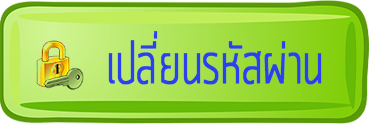
<style>
.page{position:relative;width:369px;height:124px}
.page>*{position:absolute;margin:0}
.t1{font:60px "Quark-Light";color:#2b41ec;font-weight:bold;scale:0.73 1}
</style>
<div class="page">
<p class="t1" style="left:108px;top:31px;width:214px;height:54px">เปลี่ยนรหัสผ่าน</p>
</div>
